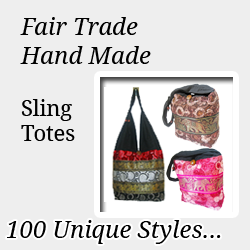
<style>
.page{position:relative;width:250px;height:250px;background:#eeeeee}
.page>*{position:absolute;margin:0}
.t1{font:24px "DroidSerif-Italic";color:#000000}
.t2{font:21.6px "DroidSerif";color:#000000}
</style>
<div class="page">
<p class="t1" style="left:20px;top:17px;width:131px;height:124px">Fair Trade<br>Hand Made<br><br><span class="t2">Sling<br>Totes</span></p>
<p class="t1" style="left:7px;top:220px;width:214px;height:24px">100 Unique Styles...</p>
</div>
